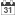
<style>
.page{position:relative;width:16px;height:16px;background:#ffffff}
.page>*{position:absolute;margin:0}
.t1{font:7.6px "Arial-BoldMT";color:#5c5c5c}
</style>
<div class="page">
<p class="t1" style="left:3px;top:7px;width:9px;height:6px">31</p>
</div>
